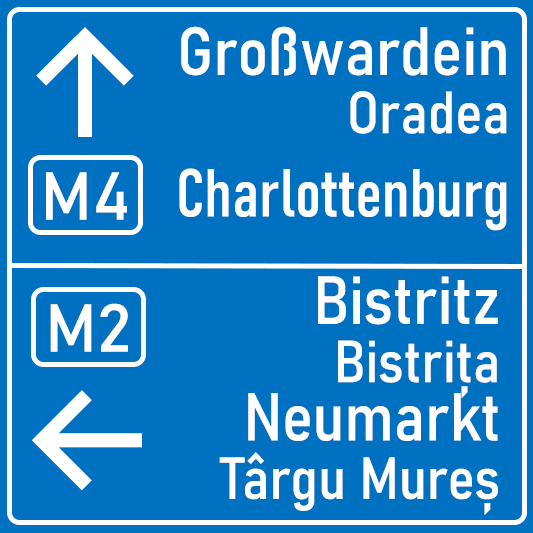
<style>
.page{position:relative;width:533px;height:533px;background:#0070c0}
.page>*{position:absolute;margin:0}
.t1{font:150px "Inter-Medium";color:#ffffff}
.t2{font:66.7px/83.3px "Bahnschrift-Condensed";color:#ffffff}
.t3{font:66.7px/58.3px "Bahnschrift-SemiCondensed";color:#ffffff}
.t4{font:58.3px/58.3px "Bahnschrift-SemiCondensed";color:#ffffff}
.t5{font:66.7px "Bahnschrift";color:#ffffff}
</style>
<div class="page">
<p class="t1" style="left:36px;top:27px;width:98px;height:110px">↑</p>
<p class="t2" style="left:179px;top:26px;width:328px;height:205px;text-align:right"><span class="t3">Großwardein<br></span><span class="t4">Oradea<br></span>Charlottenburg</p>
<p class="t5" style="left:46px;top:172px;width:81px;height:48px">M4</p>
<p class="t4" style="left:219px;top:276px;width:279px;height:239px;text-align:right"><span class="t3">Bistritz<br></span>Bistrița<br><span class="t3">Neumarkt<br></span>Târgu Mureș</p>
<p class="t5" style="left:50px;top:303px;width:78px;height:49px">M2</p>
<p class="t1" style="left:32px;top:390px;width:110px;height:100px">←</p>
</div>
